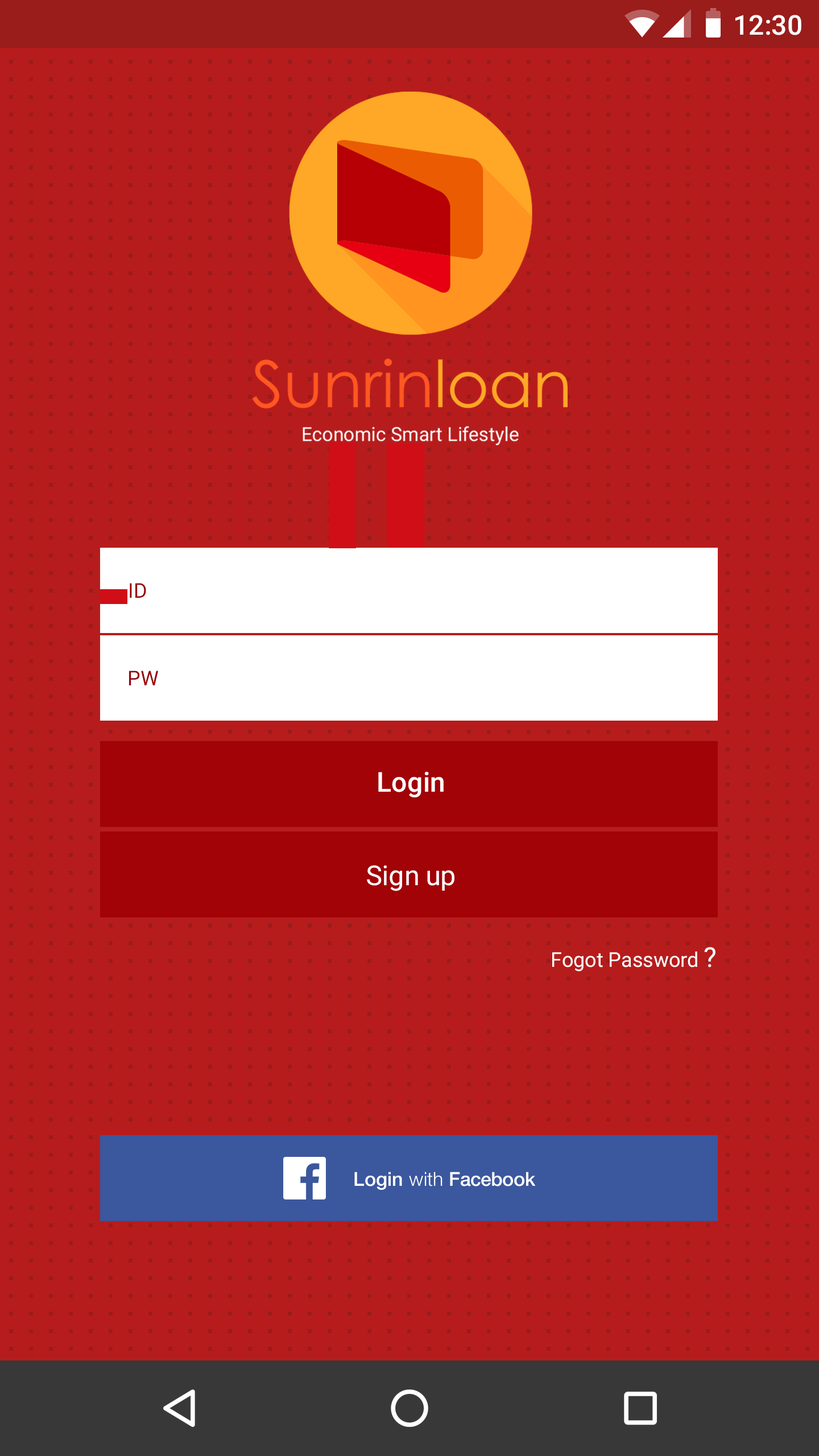
<style>
.page{position:relative;width:819px;height:1456px;background:#b71c1c}
.page>*{position:absolute;margin:0}
.t1{font:27.3px "Roboto-Medium";color:#ffffff}
.t2{font:20.5px "Roboto-Regular";color:#980207}
.t3{font:27.3px "Roboto-Regular";color:#ffffff}
.t4{font:20.5px "Roboto-Regular";color:#ffffff}
</style>
<div class="page">
<p class="t1" style="left:735px;top:15px;width:66px;height:20px">12:30</p>
<p class="t2" style="left:130px;top:583px;width:16px;height:15px">ID</p>
<p class="t2" style="left:129px;top:671px;width:29px;height:14px">PW</p>
<p class="t1" style="left:378px;top:772px;width:66px;height:25px">Login</p>
<p class="t3" style="left:367px;top:865px;width:87px;height:26px">Sign up</p>
<p class="t4" style="left:552px;top:947px;width:163px;height:24px">Fogot Password <span class="t3">?</span></p>
</div>
